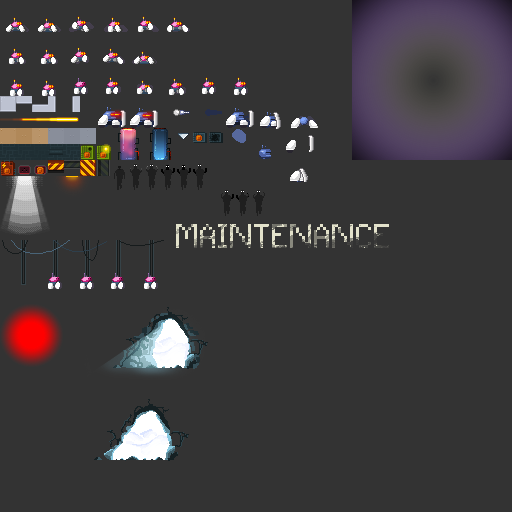
<style>
.page{position:relative;width:512px;height:512px;background:#333333}
.page>*{position:absolute;margin:0}
.t1{font:48px "Pixel-UniCode";text-transform:uppercase}
</style>
<div class="page">
<p class="t1" style="left:176px;top:224px;width:213px;height:24px">Maintenance</p>
</div>
